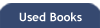
<style>
.page{position:relative;width:100px;height:28px;background:#364970}
.page>*{position:absolute;margin:0}
.t1{font:12px "TrebuchetMS-Bold";color:#ffffff}
</style>
<div class="page">
<p class="t1" style="left:19px;top:12px;width:63px;height:10px">Used Books</p>
</div>
